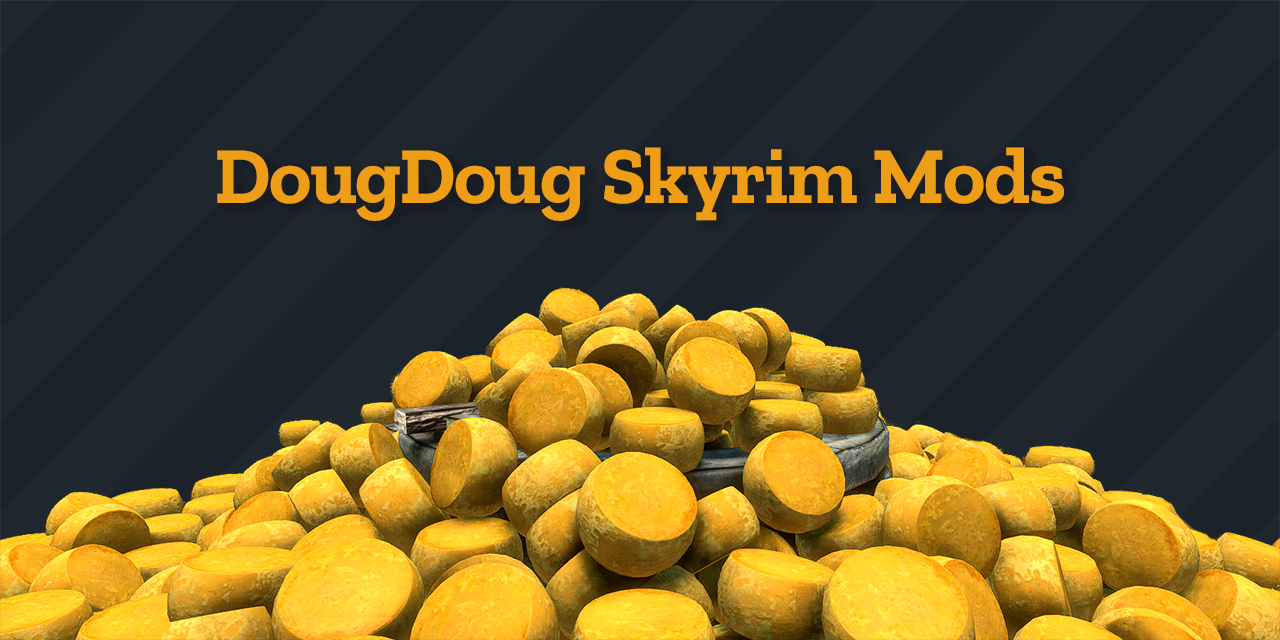
<style>
.page{position:relative;width:1280px;height:640px;background:#1c2229}
.page>*{position:absolute;margin:0}
.t1{font:80.8px "ZillaSlab-Bold";color:#ed9e16}
</style>
<div class="page">
<p class="t1" style="left:217px;top:147px;width:848px;height:74px">DougDoug Skyrim Mods</p>
</div>
